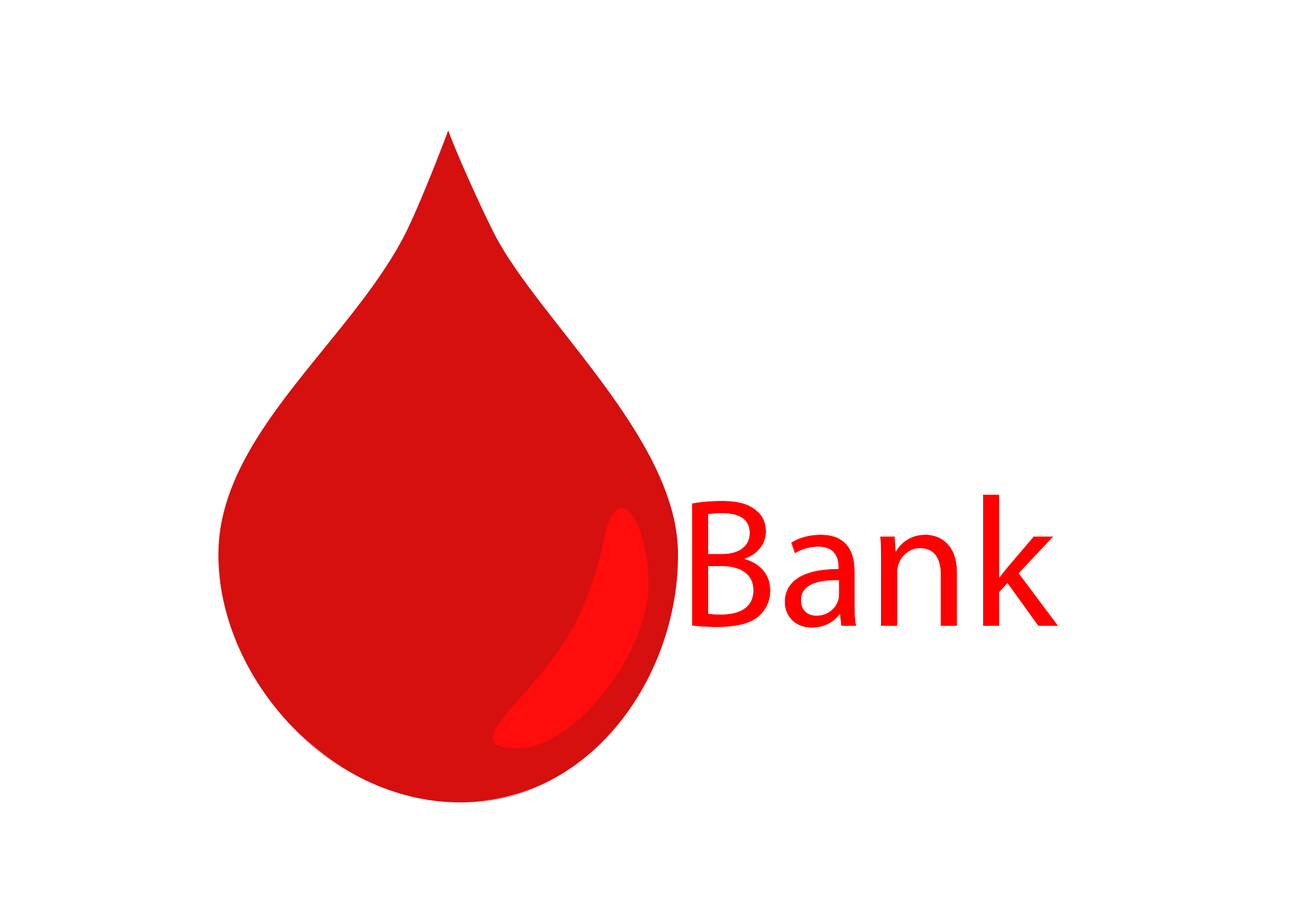
<style>
.page{position:relative;width:1292px;height:923px;background:#ffffff}
.page>*{position:absolute;margin:0}
.t1{font:184.6px "MyriadPro-Regular";color:#ff0000}
</style>
<div class="page">
<p class="t1" style="left:692px;top:495px;width:366px;height:133px">Bank</p>
</div>
